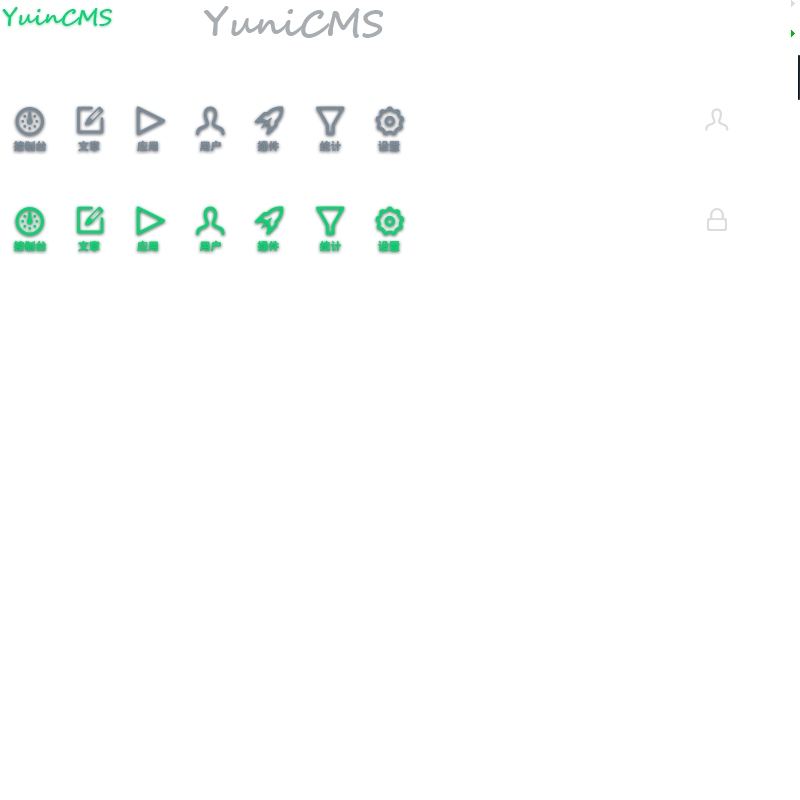
<style>
.page{position:relative;width:800px;height:800px;background:#ffffff}
.page>*{position:absolute;margin:0}
.t1{font:36px "SegoeScript-Bold";color:#a7adb1}
.t2{font:22px "SegoeScript-Bold";color:#00d970}
.t3{font:11px "DFYuanHKW9";color:#798a99}
.t4{font:11px "DFYuanHKW9";color:#00d970}
</style>
<div class="page">
<p class="t1" style="left:203px;top:6px;width:181px;height:32px">YuniCMS</p>
<p class="t2" style="left:2px;top:7px;width:110px;height:19px">YuinCMS</p>
<p class="t3" style="left:13px;top:140px;width:387px;height:12px">控制台         文章         应用            用户         插件         统计         设置</p>
<p class="t4" style="left:13px;top:240px;width:387px;height:12px">控制台         文章         应用            用户         插件         统计         设置</p>
</div>
